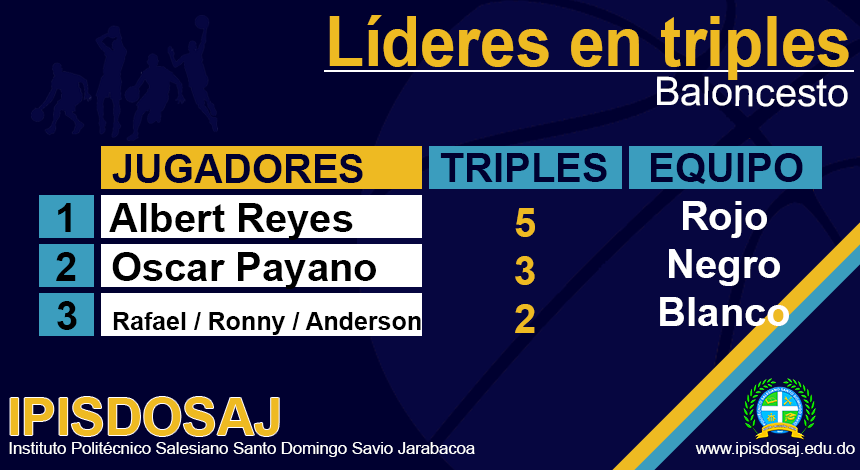
<style>
.page{position:relative;width:860px;height:470px;background:#000030}
.page>*{position:absolute;margin:0}
.t1{font:69.8px "Arial-BoldMT";color:#eeba22;scale:0.91 1}
.t2{font:39.5px "ArialMT";color:#ffffff}
.t3{font:40px "Arial-BoldMT";color:#000030}
.t4{font:40px "Arial-BoldMT";color:#000000}
.t5{font:40px "Arial-BoldMT";color:#eeba22}
.t6{font:40px "Arial-BoldMT";color:#ffffff}
.t7{font:25px "Arial-BoldMT";color:#000000}
.t8{font:51.7px "Arial-BoldMT";color:#eeba22}
.t9{font:16.6px "ArialMT";color:#ffffff}
</style>
<div class="page">
<p class="t1" style="left:329px;top:15px;width:520px;height:65px">Líderes en triples</p>
<p class="t2" style="left:657px;top:76px;width:191px;height:31px">Baloncesto</p>
<p class="t3" style="left:35px;top:154px;width:328px;height:29px">0     JUGADORES</p>
<p class="t3" style="left:440px;top:153px;width:167px;height:29px">TRIPLES</p>
<p class="t3" style="left:651px;top:153px;width:152px;height:31px">EQUIPO</p>
<p class="t4" style="left:58px;top:203px;width:295px;height:37px">1   Albert Reyes</p>
<p class="t5" style="left:515px;top:208px;width:20px;height:125px;text-align:center">5<br>3<br>2</p>
<p class="t6" style="left:660px;top:201px;width:129px;height:125px;text-align:center">Rojo<br>Negro<br>Blanco</p>
<p class="t4" style="left:56px;top:252px;width:320px;height:37px">2   Oscar Payano</p>
<p class="t7" style="left:57px;top:301px;width:364px;height:34px"><span class="t4">3   </span>Rafael / Ronny / Anderson</p>
<p class="t8" style="left:10px;top:397px;width:269px;height:39px">IPISDOSAJ</p>
<p class="t9" style="left:9px;top:442px;width:846px;height:15px">Instituto Politécnico Salesiano Santo Domingo Savio Jarabacoa                                                www.ipisdosaj.edu.do</p>
</div>
